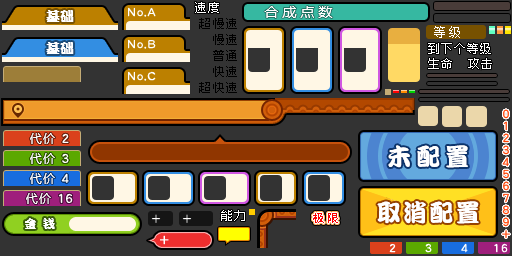
<style>
.page{position:relative;width:512px;height:256px;background:#333333}
.page>*{position:absolute;margin:0}
.t1{font:12px "ZpixEX2";letter-spacing:0.1em;color:#ffffff}
.t2{font:14px "MicrosoftYaHei";color:#ffffff}
.t3{font:14px "DFPKanTingLiuW9";color:#ffffff}
.t4{font:12px "ZpixEX2";letter-spacing:0.1em;color:#000000}
.t5{font:12px "FZXS12--GB1-0";letter-spacing:0.2em;color:#ffffff}
.t6{font:12px "MicrosoftYaHei";letter-spacing:0.1em;color:#ffffff}
.t7{font:24px "DFPKanTingLiuW9";letter-spacing:0.2em;color:#ffffff}
.t8{font:24px "DFPKanTingLiuW9";letter-spacing:0.1em;color:#ffffff}
.t9{font:12px "DFPKanTingLiuW9";letter-spacing:0.1em;color:#ffffff}
.t10{font:11px "MicrosoftYaHei";color:#ff0000}
</style>
<div class="page">
<p class="t1" style="left:195px;top:2px;width:24px;height:11px">速度</p>
<p class="t2" style="left:264px;top:6px;width:69px;height:12px">合 成 点 数</p>
<p class="t3" style="left:46px;top:10px;width:28px;height:12px">基础</p>
<p class="t4" style="left:199px;top:18px;width:38px;height:11px">超慢速</p>
<p class="t5" style="left:434px;top:26px;width:26px;height:12px">等级</p>
<p class="t4" style="left:213px;top:34px;width:24px;height:11px">慢速</p>
<p class="t3" style="left:46px;top:42px;width:28px;height:12px">基础</p>
<p class="t4" style="left:213px;top:50px;width:24px;height:11px">普通</p>
<p class="t1" style="left:428px;top:43px;width:63px;height:11px">到下个等级</p>
<p class="t1" style="left:428px;top:58px;width:24px;height:11px">生命</p>
<p class="t1" style="left:468px;top:58px;width:24px;height:11px">攻击</p>
<p class="t4" style="left:213px;top:66px;width:24px;height:11px">快速</p>
<p class="t4" style="left:199px;top:82px;width:38px;height:11px">超快速</p>
<p class="t6" style="left:30px;top:133px;width:25px;height:11px">代价</p>
<p class="t7" style="left:388px;top:145px;width:80px;height:23px">未配置</p>
<p class="t6" style="left:30px;top:153px;width:25px;height:11px">代价</p>
<p class="t6" style="left:30px;top:173px;width:25px;height:11px">代价</p>
<p class="t6" style="left:26px;top:193px;width:25px;height:11px">代价</p>
<p class="t8" style="left:377px;top:201px;width:102px;height:23px">取消配置</p>
<p class="t9" style="left:25px;top:218px;width:30px;height:11px">金 钱</p>
<p class="t1" style="left:221px;top:210px;width:24px;height:11px">能力</p>
<p class="t10" style="left:313px;top:213px;width:25px;height:10px">极 限</p>
</div>
